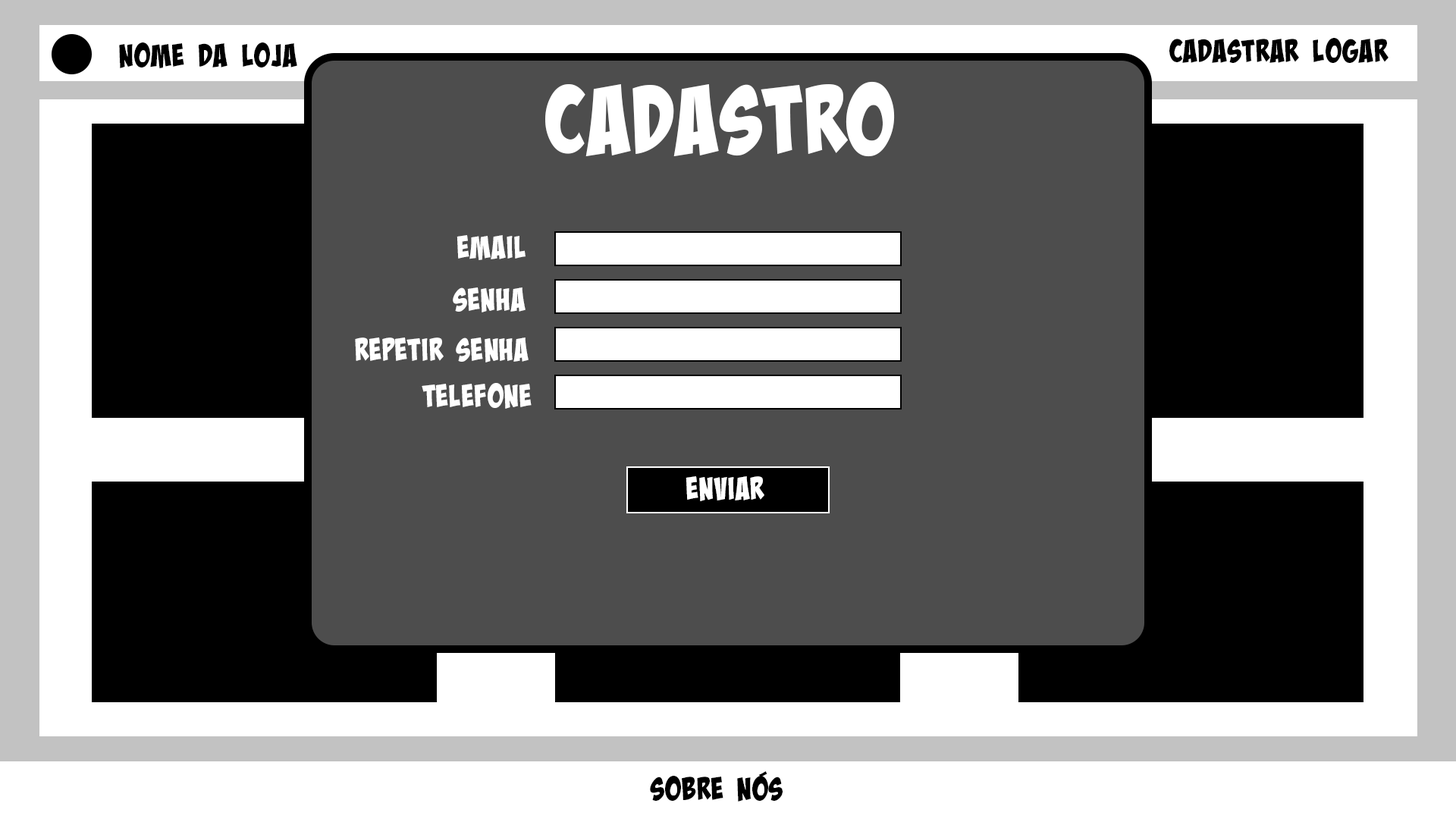
<style>
.page{position:relative;width:1456px;height:819px;background:#4d4d4d}
.page>*{position:absolute;margin:0}
.t1{font:31.6px "BadaBoomProBB";color:#000000}
.t2{font:94.8px "BadaBoomProBB";color:#ffffff}
.t3{font:31.6px "BadaBoomProBB";color:#ffffff}
</style>
<div class="page">
<p class="t1" style="left:1169px;top:38px;width:219px;height:25px">Cadastrar Logar</p>
<p class="t1" style="left:119px;top:42px;width:178px;height:26px">NOME DA LOJA</p>
<p class="t2" style="left:545px;top:81px;width:350px;height:76px">Cadastro</p>
<p class="t3" style="left:457px;top:235px;width:69px;height:25px">Email</p>
<p class="t3" style="left:453px;top:287px;width:73px;height:25px">Senha</p>
<p class="t3" style="left:355px;top:337px;width:174px;height:25px">Repetir Senha</p>
<p class="t3" style="left:422px;top:383px;width:110px;height:26px">telefone</p>
<p class="t3" style="left:686px;top:476px;width:78px;height:25px">Enviar</p>
<p class="t1" style="left:650px;top:771px;width:133px;height:31px">Sobre nós</p>
</div>
